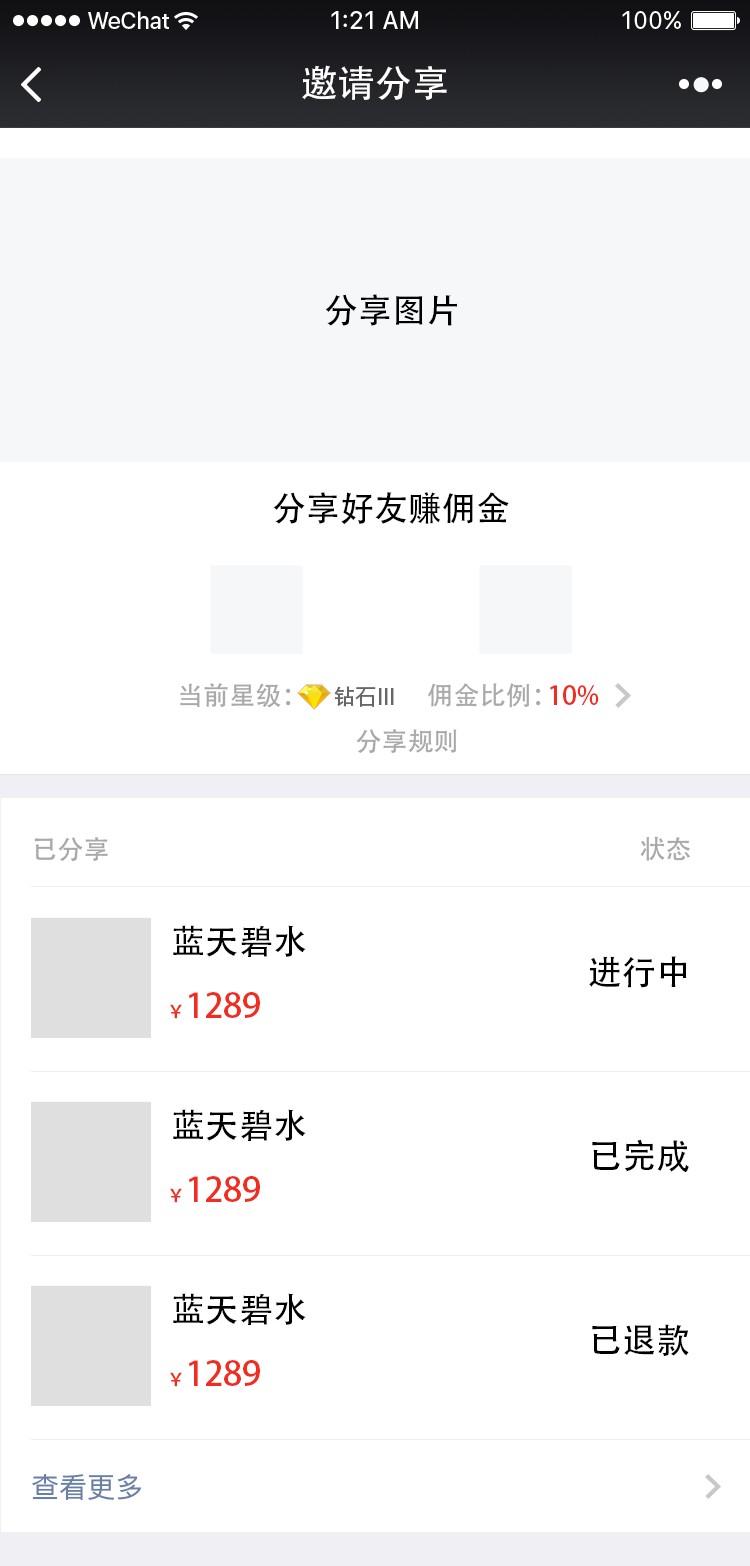
<style>
.page{position:relative;width:750px;height:1566px;background:#ffffff}
.page>*{position:absolute;margin:0}
.t1{font:37px "AdobeHeitiStd-Regular";color:#ffffff}
.t2{font:34px "AdobeHeitiStd-Regular";color:#000000}
.t3{font:26px "AdobeHeitiStd-Regular";color:#a9a9a9}
.t4{font:22px "AdobeHeitiStd-Regular";color:#666666}
.t5{font:26px "AdobeHeitiStd-Regular";color:#f12c20}
.t6{font:26.1px "AdobeHeitiStd-Regular";color:#a9a9a9}
.t7{font:34.1px "AdobeHeitiStd-Regular";color:#000000}
.t8{font:34.1px "AdobeHeitiStd-Regular";color:#f12c20}
.t9{font:18px "AdobeHeitiStd-Regular";color:#f12c20}
.t10{font:28px "PingFangSC-Regular";color:#6a7fa5}
</style>
<div class="page">
<p class="t1" style="left:302px;top:65px;width:145px;height:35px">邀请分享</p>
<p class="t2" style="left:325px;top:294px;width:132px;height:32px">分享图片</p>
<p class="t2" style="left:273px;top:492px;width:236px;height:33px">分享好友赚佣金</p>
<p class="t3" style="left:180px;top:683px;width:111px;height:25px">当前星级：</p>
<p class="t4" style="left:334px;top:686px;width:60px;height:21px">钻石III</p>
<p class="t3" style="left:428px;top:683px;width:113px;height:25px">佣金比例：</p>
<p class="t5" style="left:550px;top:685px;width:49px;height:20px">10%</p>
<p class="t3" style="left:356px;top:729px;width:101px;height:25px">分享规则</p>
<p class="t6" style="left:34px;top:837px;width:74px;height:25px">已分享</p>
<p class="t6" style="left:640px;top:836px;width:50px;height:25px">状态</p>
<p class="t7" style="left:173px;top:925px;width:133px;height:32px">蓝天碧水</p>
<p class="t7" style="left:589px;top:956px;width:98px;height:32px">进行中</p>
<p class="t8" style="left:170px;top:992px;width:90px;height:27px"><span class="t9">￥</span>1289</p>
<p class="t7" style="left:173px;top:1109px;width:133px;height:32px">蓝天碧水</p>
<p class="t7" style="left:592px;top:1139px;width:97px;height:33px">已完成</p>
<p class="t8" style="left:170px;top:1176px;width:90px;height:27px"><span class="t9">￥</span>1289</p>
<p class="t7" style="left:173px;top:1293px;width:133px;height:32px">蓝天碧水</p>
<p class="t7" style="left:592px;top:1324px;width:97px;height:32px">已退款</p>
<p class="t8" style="left:170px;top:1360px;width:90px;height:27px"><span class="t9">￥</span>1289</p>
<p class="t10" style="left:32px;top:1474px;width:109px;height:26px">查看更多</p>
</div>
